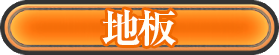
<style>
.page{position:relative;width:279px;height:55px}
.page>*{position:absolute;margin:0}
.t1{font:40px "RyuminPr6N-ExBold";letter-spacing:-0.08em;color:#fffff7}
</style>
<div class="page">
<p class="t1" style="left:102px;top:9px;width:74px;height:37px">地板</p>
</div>
